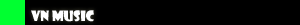
<style>
.page{position:relative;width:300px;height:25px;background:#000000}
.page>*{position:absolute;margin:0}
.t1{font:14px "ShowcardGothic-Reg";color:#ffffff}
</style>
<div class="page">
<p class="t1" style="left:31px;top:10px;width:63px;height:12px">VN music</p>
</div>
